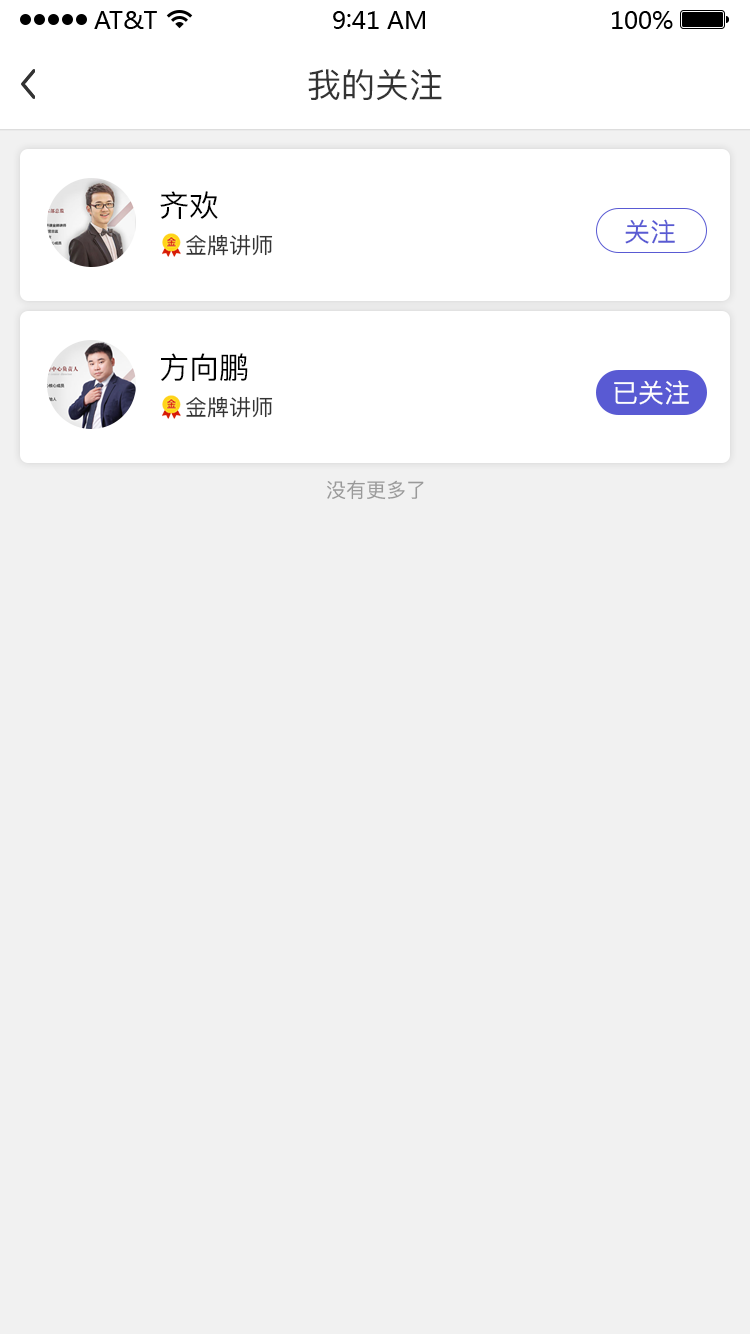
<style>
.page{position:relative;width:750px;height:1334px;background:#f1f1f1}
.page>*{position:absolute;margin:0}
.t1{font:34px "PingFang-SC-Medium";color:#333333}
.t2{font:30px "PingFang-SC-Medium";color:#000000}
.t3{font:26px "PingFang-SC-Medium";color:#595ad3}
.t4{font:22px "PingFang-SC-Medium";color:#333333}
.t5{font:26px "PingFang-SC-Medium";color:#fefefe}
.t6{font:20px "PingFang-SC-Medium";color:#999999}
</style>
<div class="page">
<p class="t1" style="left:308px;top:69px;width:134px;height:32px">我的关注</p>
<p class="t2" style="left:160px;top:191px;width:58px;height:28px">齐欢</p>
<p class="t3" style="left:625px;top:219px;width:50px;height:25px">关注</p>
<p class="t4" style="left:186px;top:234px;width:87px;height:22px">金牌讲师</p>
<p class="t2" style="left:161px;top:353px;width:87px;height:29px">方向鹏</p>
<p class="t5" style="left:614px;top:380px;width:75px;height:25px">已关注</p>
<p class="t4" style="left:186px;top:396px;width:87px;height:22px">金牌讲师</p>
<p class="t6" style="left:327px;top:480px;width:97px;height:20px">没有更多了</p>
</div>
